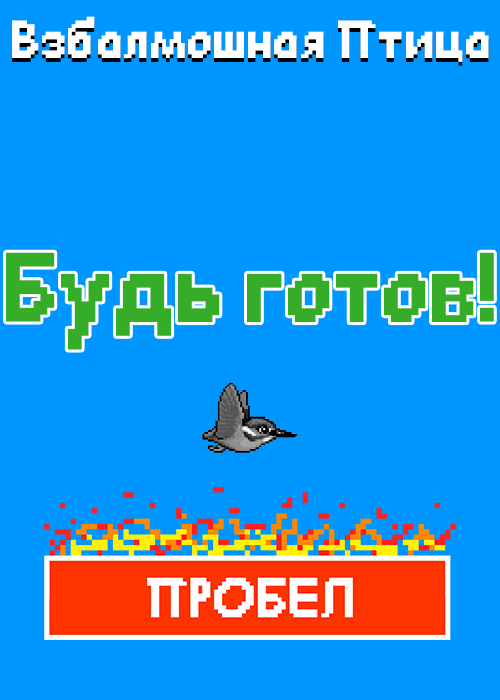
<style>
.page{position:relative;width:500px;height:700px;background:#0096ff}
.page>*{position:absolute;margin:0}
.t1{font:60px "Comic-Sans-MS-pixel-rus-eng";color:#ffffff}
.t2{font:110px "Comic-Sans-MS-pixel-rus-eng";color:#35ad28}
</style>
<div class="page">
<p class="t1" style="left:12px;top:16px;width:477px;height:46px">Взбалмошная Птица</p>
<p class="t1" style="left:12px;top:20px;width:477px;height:46px">Взбалмошная Птица</p>
<p class="t2" style="left:6px;top:252px;width:488px;height:98px">Будь готов!</p>
</div>
